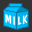
<style>
.page{position:relative;width:32px;height:32px;background:#333333}
.page>*{position:absolute;margin:0}
.t1{font:11.4px "DomCasualBT-Regular";letter-spacing:0.095em;color:#ffffff;scale:1.04 1}
.t2{font:11.4px "DomCasualBT-Regular";letter-spacing:0.095em;color:#ffffff}
</style>
<div class="page">
<p class="t1" style="left:5px;top:14px;width:10px;height:12px;rotate:14deg">MI</p>
<p class="t2" style="left:18px;top:14px;width:10px;height:11px;rotate:-15deg">LK</p>
</div>
